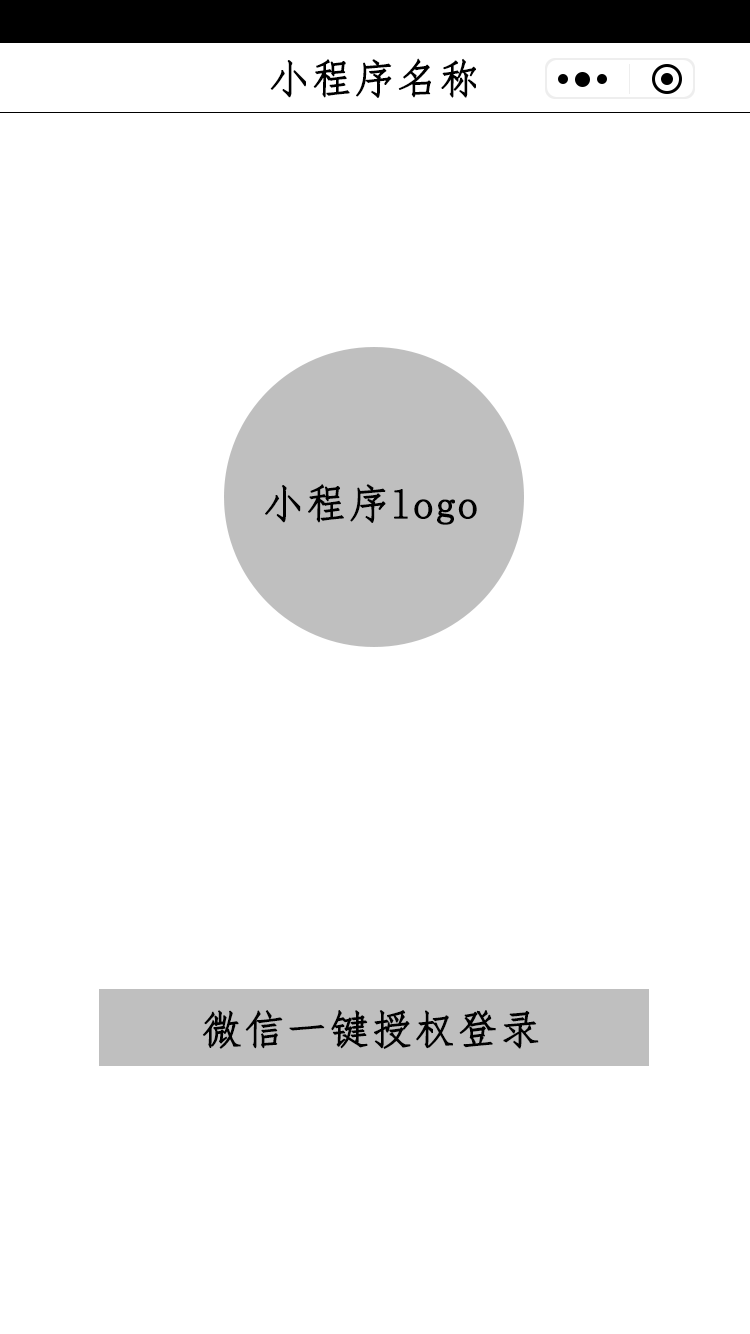
<style>
.page{position:relative;width:750px;height:1334px;background:#ffffff}
.page>*{position:absolute;margin:0}
.t1{font:40.7px "FangSong";letter-spacing:0.02em;color:#000000;font-weight:bold}
</style>
<div class="page">
<p class="t1" style="left:270px;top:58px;width:206px;height:40px">小程序名称</p>
<p class="t1" style="left:265px;top:484px;width:212px;height:41px">小程序logo</p>
<p class="t1" style="left:202px;top:1010px;width:337px;height:39px">微信一键授权登录</p>
</div>
